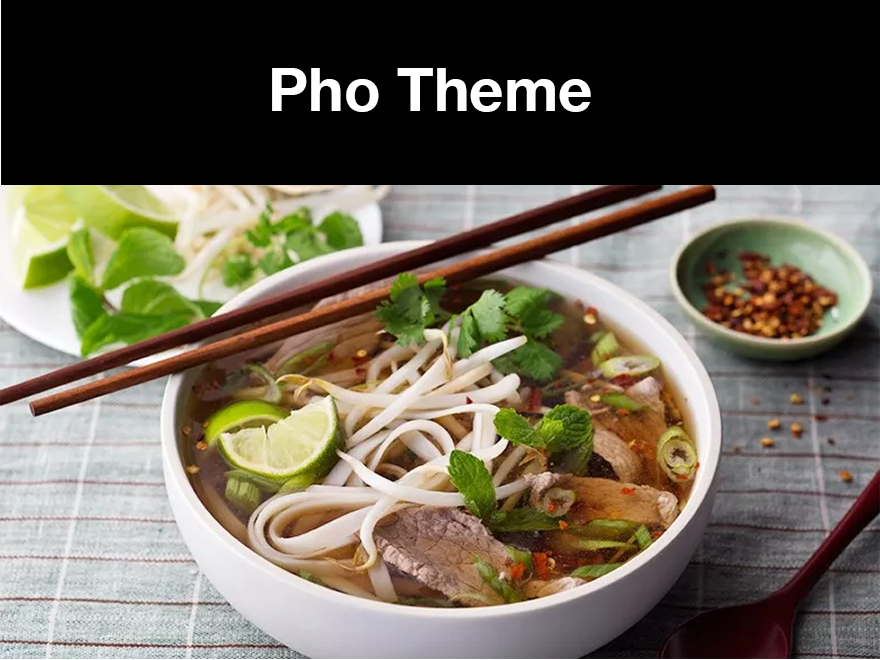
<style>
.page{position:relative;width:880px;height:660px;background:#000000}
.page>*{position:absolute;margin:0}
.t1{font:60px "HelveticaNeue-Bold";color:#ffffff}
</style>
<div class="page">
<p class="t1" style="left:272px;top:68px;width:319px;height:44px">Pho Theme</p>
</div>
